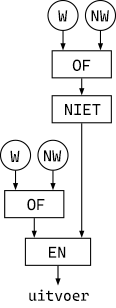
<style>
.page{position:relative;width:116px;height:308px;background:#ffffff}
.page>*{position:absolute;margin:0}
.t1{font:15.9px "CascadiaCode";color:#000000}
.t2{font:14.9px "CascadiaCode";color:#000000}
</style>
<div class="page">
<p class="t1" style="left:58px;top:10px;width:10px;height:12px">W</p>
<p class="t1" style="left:91px;top:10px;width:18px;height:12px">NW</p>
<p class="t1" style="left:72px;top:59px;width:19px;height:12px">OF</p>
<p class="t1" style="left:65px;top:104px;width:36px;height:11px">NIET</p>
<p class="t1" style="left:10px;top:150px;width:10px;height:12px">W</p>
<p class="t1" style="left:44px;top:150px;width:18px;height:12px">NW</p>
<p class="t1" style="left:27px;top:198px;width:18px;height:13px">OF</p>
<p class="t1" style="left:49px;top:246px;width:17px;height:12px">EN</p>
<p class="t2" style="left:29px;top:289px;width:60px;height:12px">uitvoer</p>
</div>
